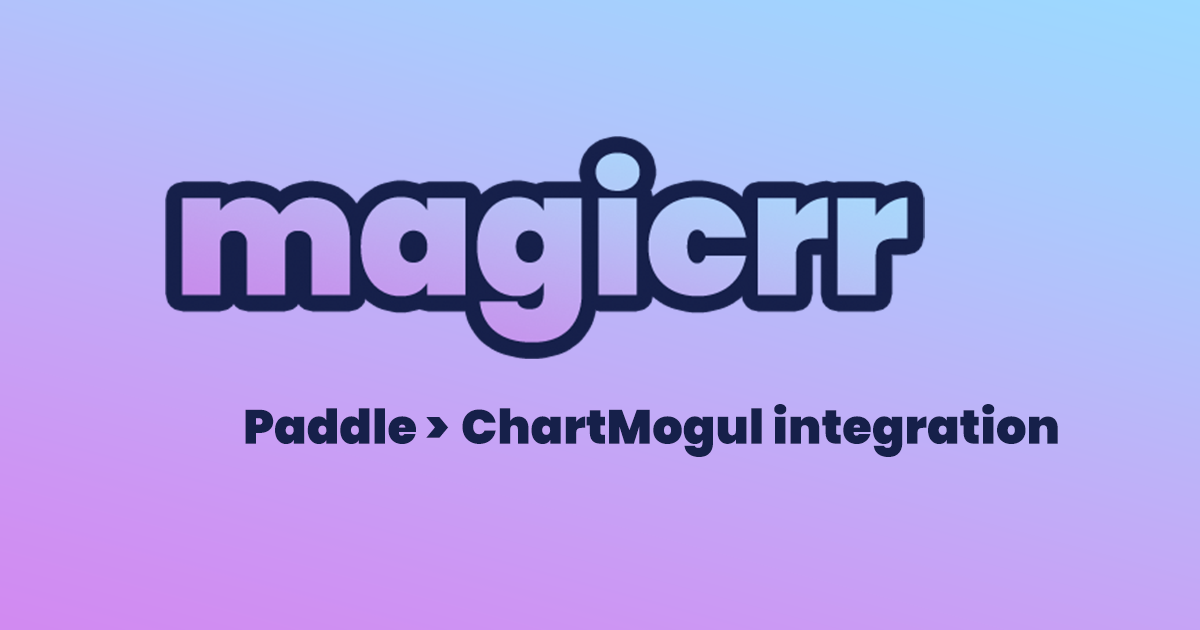
<style>
.page{position:relative;width:1200px;height:630px}
.page>*{position:absolute;margin:0}
.t1{font:48px "Poppins-Black";color:#16204a}
</style>
<div class="page">
<p class="t1" style="left:245px;top:404px;width:813px;height:53px">Paddle &gt; ChartMogul integration</p>
</div>
